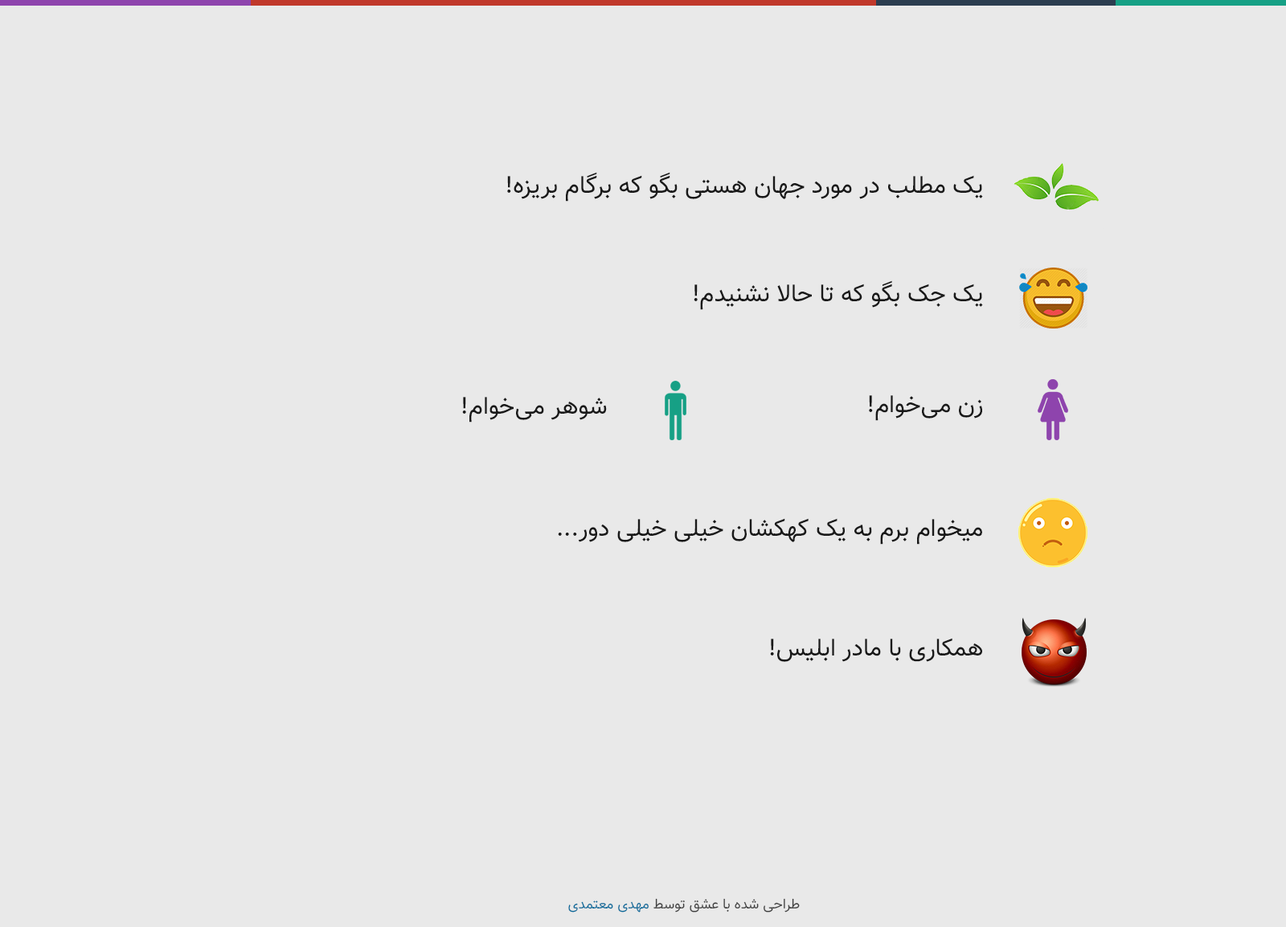
<style>
.page{position:relative;width:1286px;height:927px;background:#e9e9e9}
.page>*{position:absolute;margin:0}
.t1{font:24.2px "Vazir";color:#191919}
.t2{font:14.2px "Vazir-Light";color:#3d3d3d}
.t3{font:14.2px "Vazir-Light";color:#086c9b}
</style>
<div class="page">
<p class="t1" style="left:507px;top:172px;width:476px;height:30px">یک مطلب در مورد جهان هستی بگو که برگام بریزه!</p>
<p class="t1" style="left:694px;top:280px;width:289px;height:30px">یک جک بگو که تا حالا نشنیدم!</p>
<p class="t1" style="left:462px;top:397px;width:145px;height:26px">شوهر می‌خوام!</p>
<p class="t1" style="left:869px;top:395px;width:113px;height:26px">زن می‌خوام!</p>
<p class="t1" style="left:558px;top:518px;width:424px;height:27px">میخوام برم به یک کهکشان خیلی خیلی دور...</p>
<p class="t1" style="left:770px;top:638px;width:212px;height:24px">همکاری با مادر ابلیس!</p>
<p class="t2" style="left:568px;top:898px;width:232px;height:15px">طراحی شده با عشق توسط <span class="t3">مهدی معتمدی</span></p>
</div>
